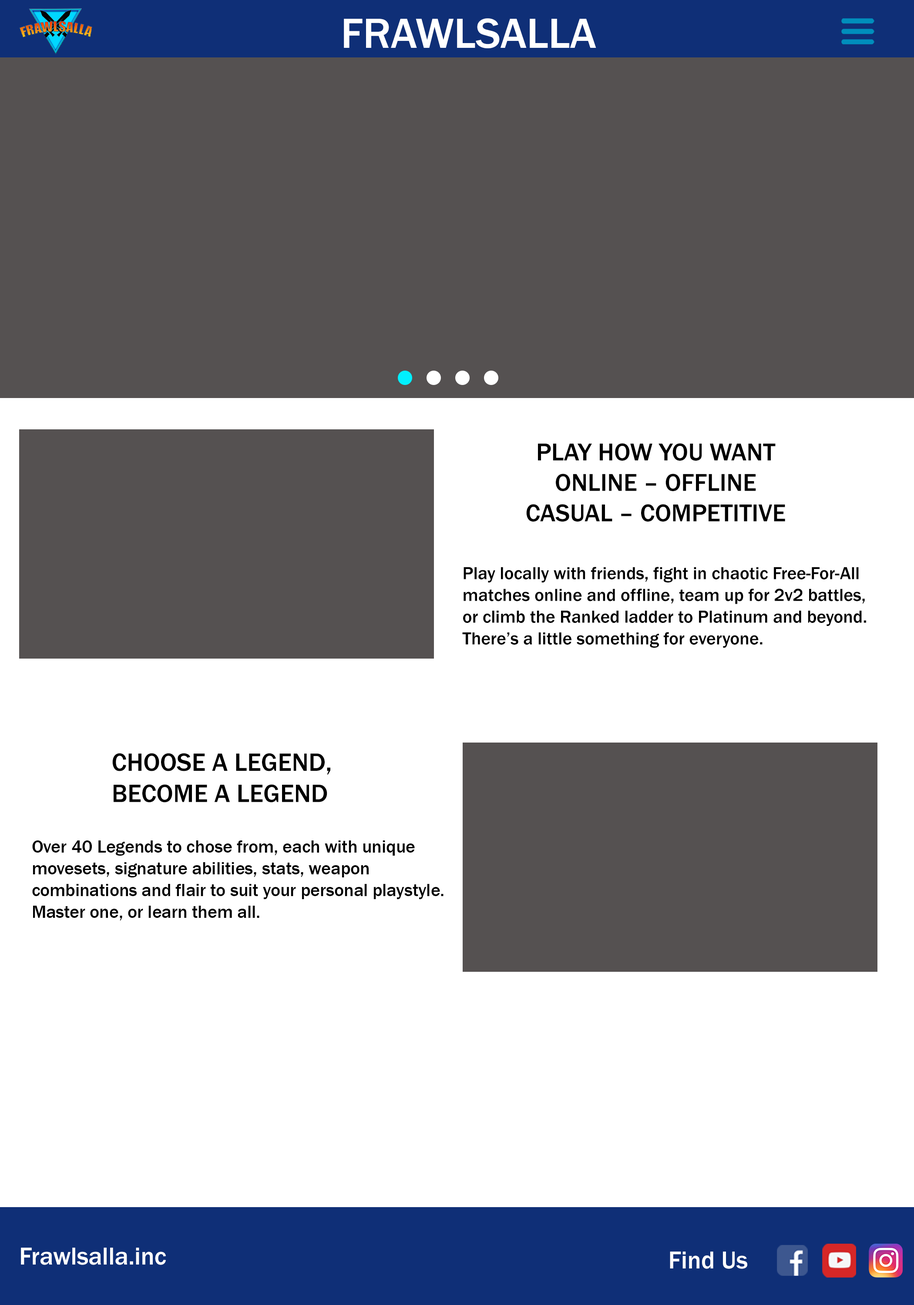
<style>
.page{position:relative;width:914px;height:1305px;background:#ffffff}
.page>*{position:absolute;margin:0}
.t1{font:43.5px "FranklinGothic-Medium";color:#ffffff}
.t2{font:25.4px "FranklinGothic-Medium";color:#000000}
.t3{font:18.1px "FranklinGothic-Medium";color:#000000}
.t4{font:26px "FranklinGothic-Medium";color:#000000}
.t5{font:25.4px "FranklinGothic-Medium";color:#ffffff}
</style>
<div class="page">
<p class="t1" style="left:344px;top:18px;width:252px;height:30px">FRAWLSALLA</p>
<p class="t2" style="left:526px;top:443px;width:259px;height:79px;text-align:center">PLAY HOW YOU WANT<br>ONLINE – OFFLINE<br>CASUAL – COMPETITIVE</p>
<p class="t3" style="left:462px;top:567px;width:404px;height:81px">Play locally with friends, fight in chaotic Free-For-All <br>matches online and offline, team up for 2v2 battles, <br>or climb the Ranked ladder to Platinum and beyond.<br>There’s a little something for everyone.</p>
<p class="t4" style="left:112px;top:753px;width:218px;height:50px">CHOOSE A LEGEND,<br>BECOME A LEGEND</p>
<p class="t3" style="left:32px;top:841px;width:411px;height:80px">Over 40 Legends to chose from, each with unique <br>movesets, signature abilities, stats, weapon <br>combinations and flair to suit your personal playstyle. <br>Master one, or learn them all.</p>
<p class="t5" style="left:21px;top:1248px;width:145px;height:17px">Frawlsalla.inc</p>
<p class="t5" style="left:670px;top:1252px;width:77px;height:17px">Find Us</p>
</div>
